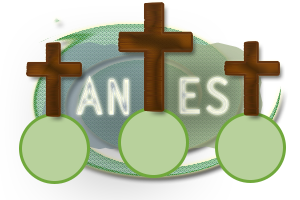
<style>
.page{position:relative;width:300px;height:200px}
.page>*{position:absolute;margin:0}
.t1{font:48px "LetterGothicStd-Bold"}
.t2{font:48px "LetterGothicStd-Bold";color:#e8e9d6}
</style>
<div class="page">
<p class="t1" style="left:77px;top:76px;width:51px;height:39px">AN</p>
<p class="t1" style="left:77px;top:76px;width:51px;height:39px">AN</p>
<p class="t2" style="left:180px;top:77px;width:48px;height:37px">ES</p>
<p class="t2" style="left:180px;top:77px;width:48px;height:37px">ES</p>
</div>
